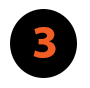
<style>
.page{position:relative;width:90px;height:88px;background:#ffffff}
.page>*{position:absolute;margin:0}
.t1{font:47.5px "MyriadPro-Bold";letter-spacing:0.2em;color:#f25d23}
</style>
<div class="page">
<p class="t1" style="left:33px;top:27px;width:23px;height:31px">3</p>
</div>
